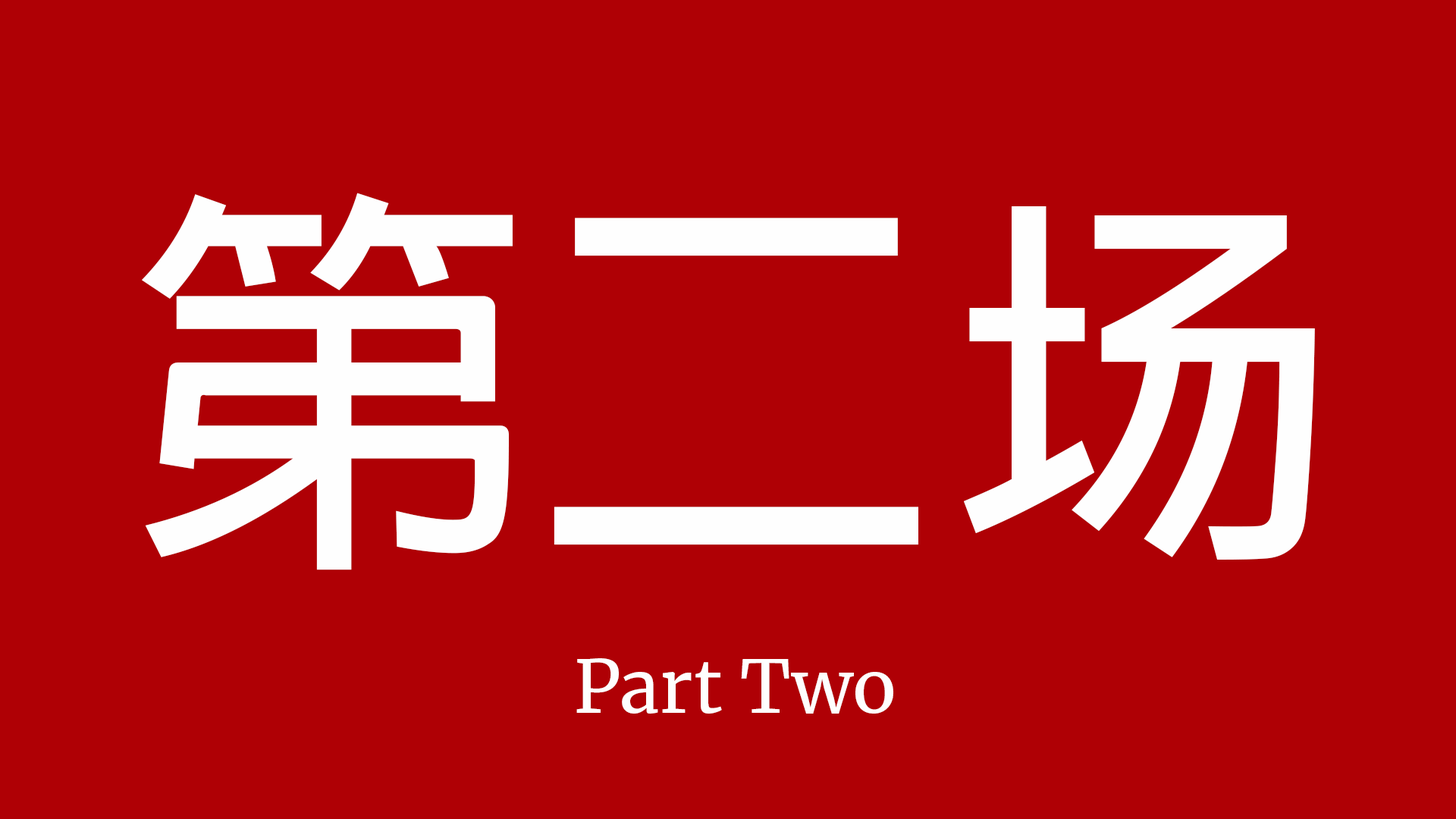
<style>
.page{position:relative;width:1456px;height:819px;background:#af0005}
.page>*{position:absolute;margin:0}
.t1{font:404.4px "AdobeFanHeitiStd-Bold";color:#fefefe}
.t2{font:404.4px "MicrosoftJhengHeiBold";color:#fefefe}
.t3{font:72.8px "Merriweather-Regular";color:#fefefe}
</style>
<div class="page">
<p class="t1" style="left:142px;top:193px;width:1173px;height:377px">第二<span class="t2">场</span></p>
<p class="t3" style="left:576px;top:658px;width:317px;height:56px">Part Two</p>
</div>
